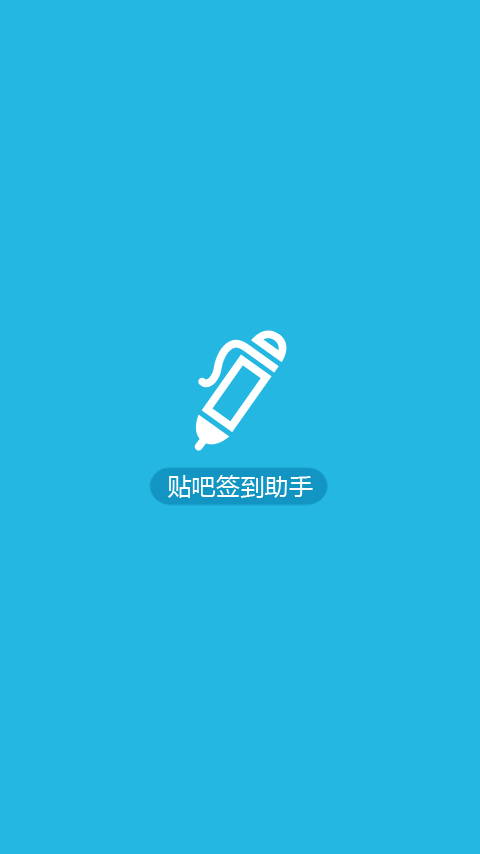
<style>
.page{position:relative;width:480px;height:854px;background:#24b7e2}
.page>*{position:absolute;margin:0}
.t1{font:24.3px "MicrosoftYaHei";color:#ffffff}
</style>
<div class="page">
<p class="t1" style="left:168px;top:475px;width:145px;height:23px">贴吧签到助手</p>
</div>
